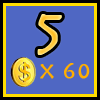
<style>
.page{position:relative;width:100px;height:100px;background:#4f67c3}
.page>*{position:absolute;margin:0}
.t1{font:60px "Herculanum";font-weight:bold}
.t2{font:24px "Herculanum";color:#ffae00;font-weight:bold}
</style>
<div class="page">
<p class="t1" style="left:37px;top:14px;width:25px;height:41px">5</p>
<p class="t2" style="left:40px;top:63px;width:50px;height:16px">x 60</p>
</div>
